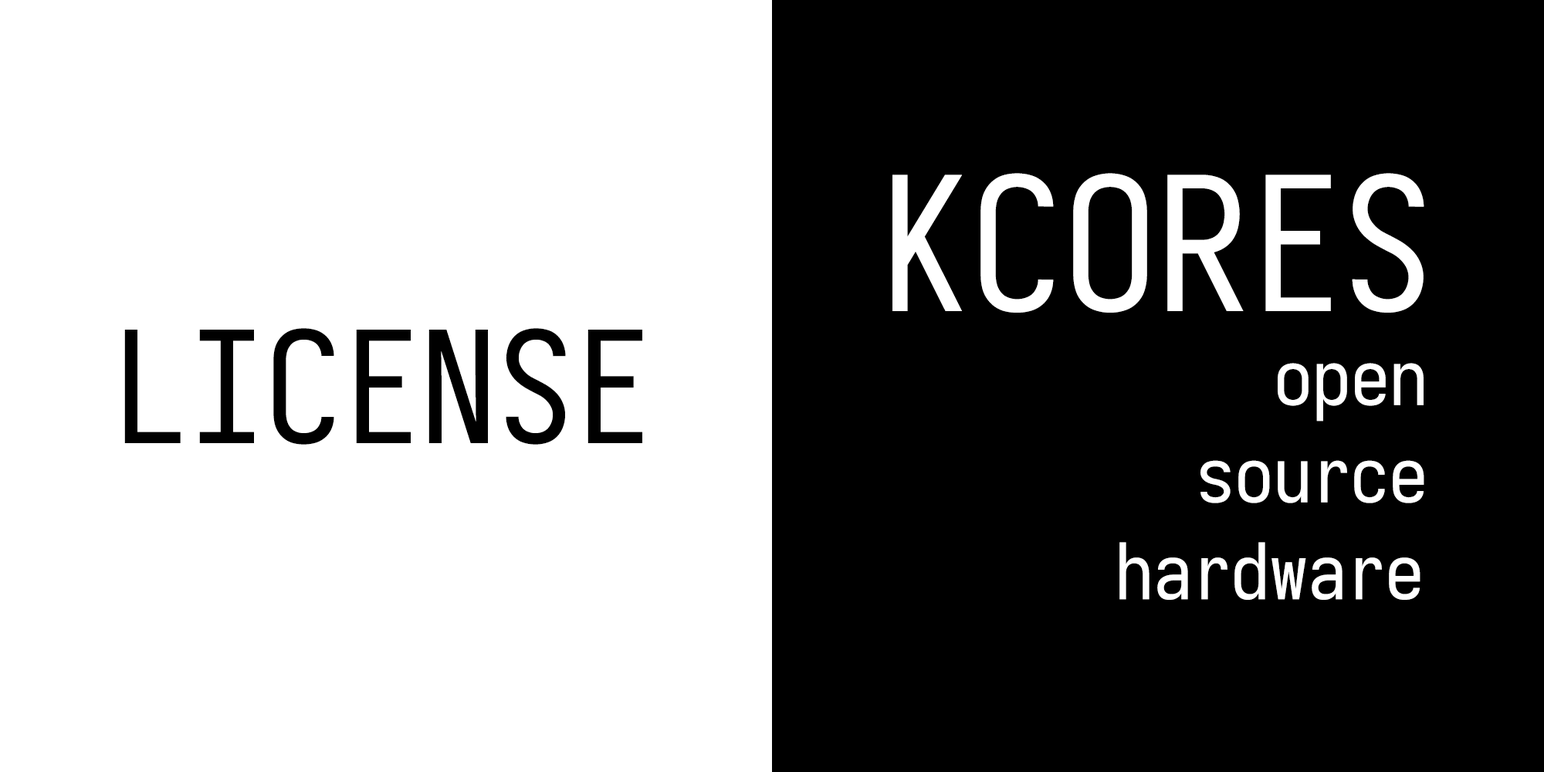
<style>
.page{position:relative;width:1544px;height:772px;background:#ffffff}
.page>*{position:absolute;margin:0}
.t1{font:185.3px "Sarasa-Mono-SC-Regular";color:#ffffff}
.t2{font:154.4px "Sarasa-Mono-SC-Regular";color:#000000}
.t3{font:77.2px "Sarasa-Mono-SC-Regular";color:#ffffff}
</style>
<div class="page">
<p class="t1" style="left:893px;top:173px;width:532px;height:140px">KCORES</p>
<p class="t2" style="left:124px;top:328px;width:518px;height:117px">LICENSE</p>
<p class="t3" style="left:1278px;top:363px;width:146px;height:59px">open</p>
<p class="t3" style="left:1201px;top:460px;width:224px;height:43px">source</p>
<p class="t3" style="left:1120px;top:542px;width:301px;height:58px">hardware</p>
</div>
